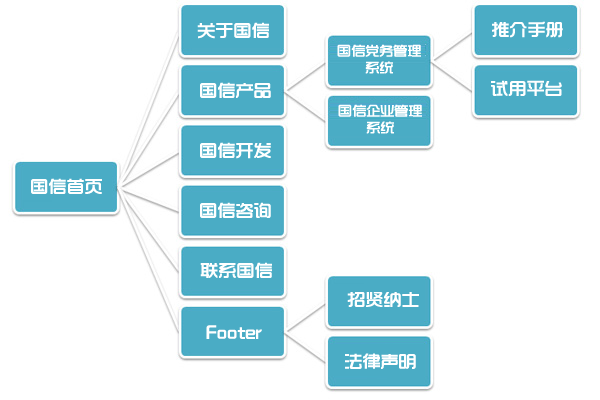
<style>
.page{position:relative;width:600px;height:400px;background:#ffffff}
.page>*{position:absolute;margin:0}
.t1{font:18px "TRENDS";letter-spacing:0.005em;color:#ffffff;font-weight:bold}
.t2{font:14px "TRENDS";letter-spacing:0.005em;color:#ffffff;font-weight:bold}
</style>
<div class="page">
<p class="t1" style="left:197px;top:22px;width:72px;height:17px">关于国信</p>
<p class="t1" style="left:492px;top:21px;width:71px;height:17px">推介手册</p>
<p class="t2" style="left:337px;top:44px;width:84px;height:30px;text-align:center">国信党务管理<br>系统</p>
<p class="t1" style="left:200px;top:82px;width:71px;height:16px">国信产品</p>
<p class="t1" style="left:491px;top:80px;width:71px;height:16px">试用平台</p>
<p class="t2" style="left:338px;top:104px;width:84px;height:30px;text-align:center">国信企业管理<br>系统</p>
<p class="t1" style="left:200px;top:142px;width:71px;height:17px">国信开发</p>
<p class="t1" style="left:31px;top:178px;width:71px;height:16px">国信首页</p>
<p class="t1" style="left:200px;top:202px;width:71px;height:16px">国信咨询</p>
<p class="t1" style="left:200px;top:262px;width:72px;height:16px">联系国信</p>
<p class="t1" style="left:347px;top:292px;width:72px;height:15px">招贤纳士</p>
<p class="t1" style="left:206px;top:325px;width:56px;height:14px">Footer</p>
<p class="t1" style="left:345px;top:353px;width:71px;height:16px">法律声明</p>
</div>
